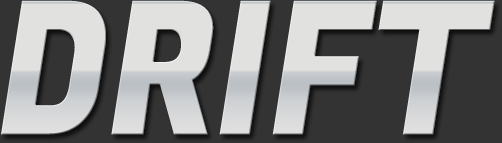
<style>
.page{position:relative;width:502px;height:143px;background:#333333}
.page>*{position:absolute;margin:0}
.t1{font:185.2px "FugazOne-Regular";color:#dfdfdf;scale:0.89 1}
</style>
<div class="page">
<p class="t1" style="left:1px;top:0px;width:494px;height:135px">DRIFT</p>
</div>
